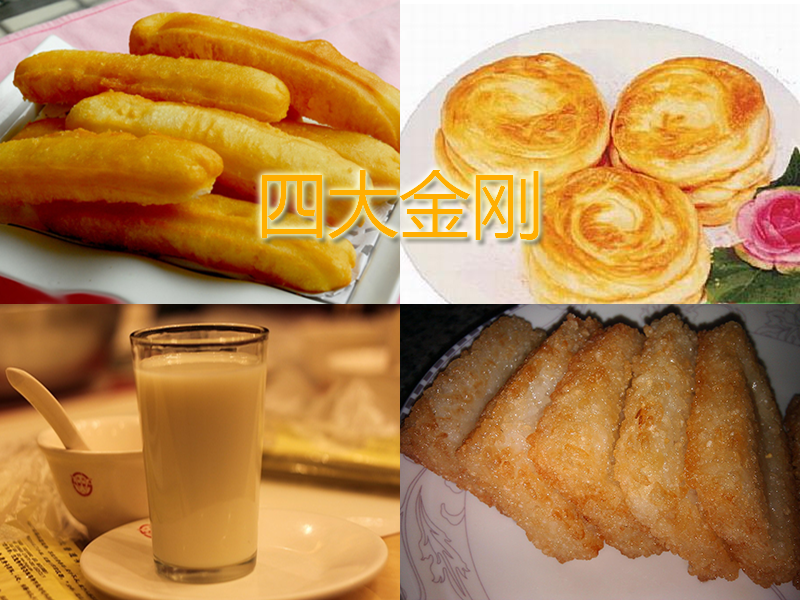
<style>
.page{position:relative;width:800px;height:600px}
.page>*{position:absolute;margin:0}
.t1{font:72px "MicrosoftYaHei";color:#ffae00}
</style>
<div class="page">
<p class="t1" style="left:261px;top:170px;width:278px;height:70px">四大金刚</p>
</div>
